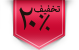
<style>
.page{position:relative;width:79px;height:50px;background:#ffffff}
.page>*{position:absolute;margin:0}
.t1{font:14px "AdobeArabic-Regular";color:#1e120d}
.t2{font:36px "AdobeArabic-Regular";color:#1e120d}
</style>
<div class="page">
<p class="t1" style="left:34px;top:5px;width:26px;height:10px">تخفیف</p>
<p class="t2" style="left:39px;top:14px;width:11px;height:17px">٪</p>
</div>
